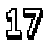
<style>
.page{position:relative;width:48px;height:48px;background:#ffffff}
.page>*{position:absolute;margin:0}
.t1{font:36px "KarmaFuture-Regular";color:#010101}
</style>
<div class="page">
<p class="t1" style="left:6px;top:8px;width:37px;height:32px">17</p>
</div>
